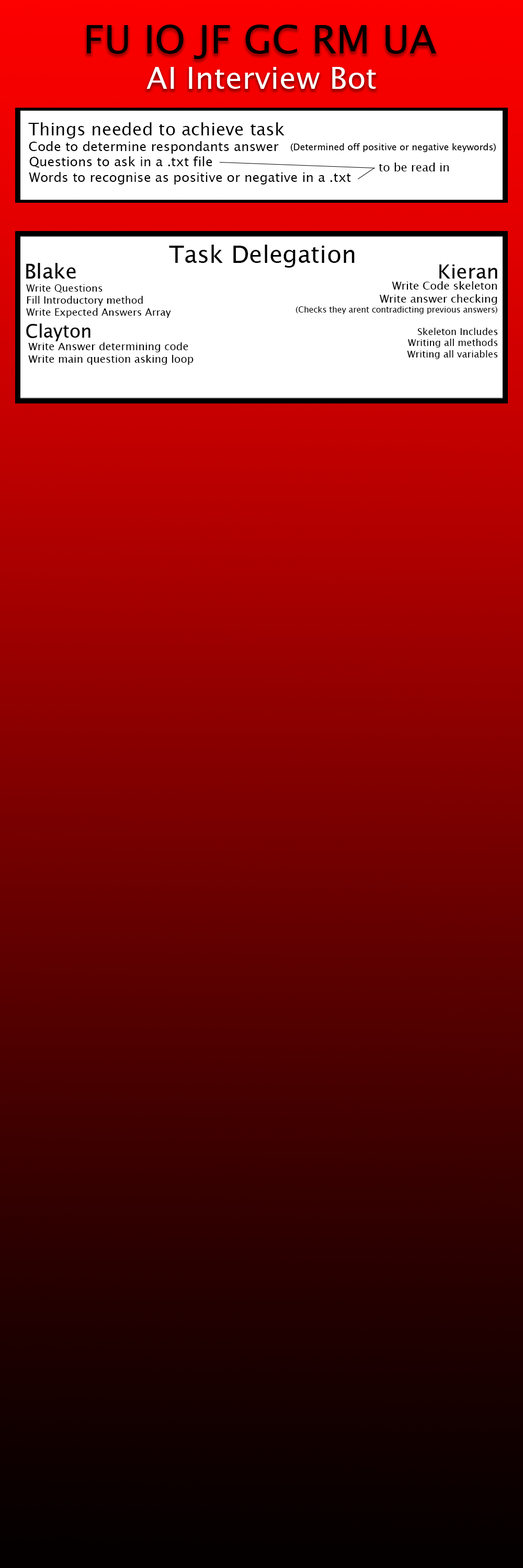
<style>
.page{position:relative;width:523px;height:1568px}
.page>*{position:absolute;margin:0}
.t1{font:17.4px "LucidaSansUnicode";color:#000000}
.t2{font:13.1px "LucidaSansUnicode";color:#000000}
.t3{font:11.5px "LucidaSansUnicode";color:#000000}
.t4{font:24px "LucidaSansUnicode";color:#000000}
.t5{font:8.2px "LucidaSansUnicode";color:#000000}
.t6{font:10.9px "LucidaSansUnicode";color:#000000}
.t7{font:10px "LucidaSansUnicode";color:#000000}
.t8{font:9.5px "LucidaSansUnicode";color:#000000}
.t9{font:10.5px "LucidaSansUnicode";color:#000000}
</style>
<div class="page">
<p class="t1" style="left:28px;top:122px;width:256px;height:17px">Things needed to achieve task</p>
<p class="t2" style="left:29px;top:141px;width:250px;height:13px">Code to determine respondants answer</p>
<p class="t2" style="left:29px;top:156px;width:322px;height:29px">Questions to ask in a .txt file<br>Words to recognise as positive or negative in a .txt</p>
<p class="t3" style="left:378px;top:163px;width:70px;height:8px">to be read in</p>
<p class="t4" style="left:169px;top:245px;width:185px;height:23px">Task Delegation</p>
<p class="t5" style="left:295px;top:281px;width:202px;height:33px;text-align:right"><span class="t6">Write Code skeleton<br>Write answer checking<br></span>(Checks they arent contradicting previous answers)</p>
<p class="t7" style="left:26px;top:284px;width:145px;height:34px">Write Questions<br>Fill Introductory method<br>Write Expected Answers Array</p>
<p class="t8" style="left:407px;top:328px;width:91px;height:31px;text-align:right">Skeleton Includes<br>Writing all methods<br>Writing all variables</p>
<p class="t9" style="left:28px;top:342px;width:165px;height:23px">Write Answer determining code<br>Write main question asking loop</p>
</div>
